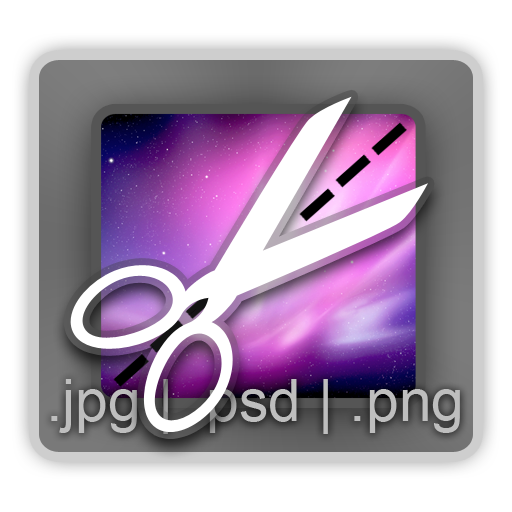
<style>
.page{position:relative;width:512px;height:512px;background:#ffffff}
.page>*{position:absolute;margin:0}
.t1{font:59.1px "ArialMT";color:#bebebe}
</style>
<div class="page">
<p class="t1" style="left:51px;top:379px;width:409px;height:55px">.jpg | .psd | .png</p>
</div>
